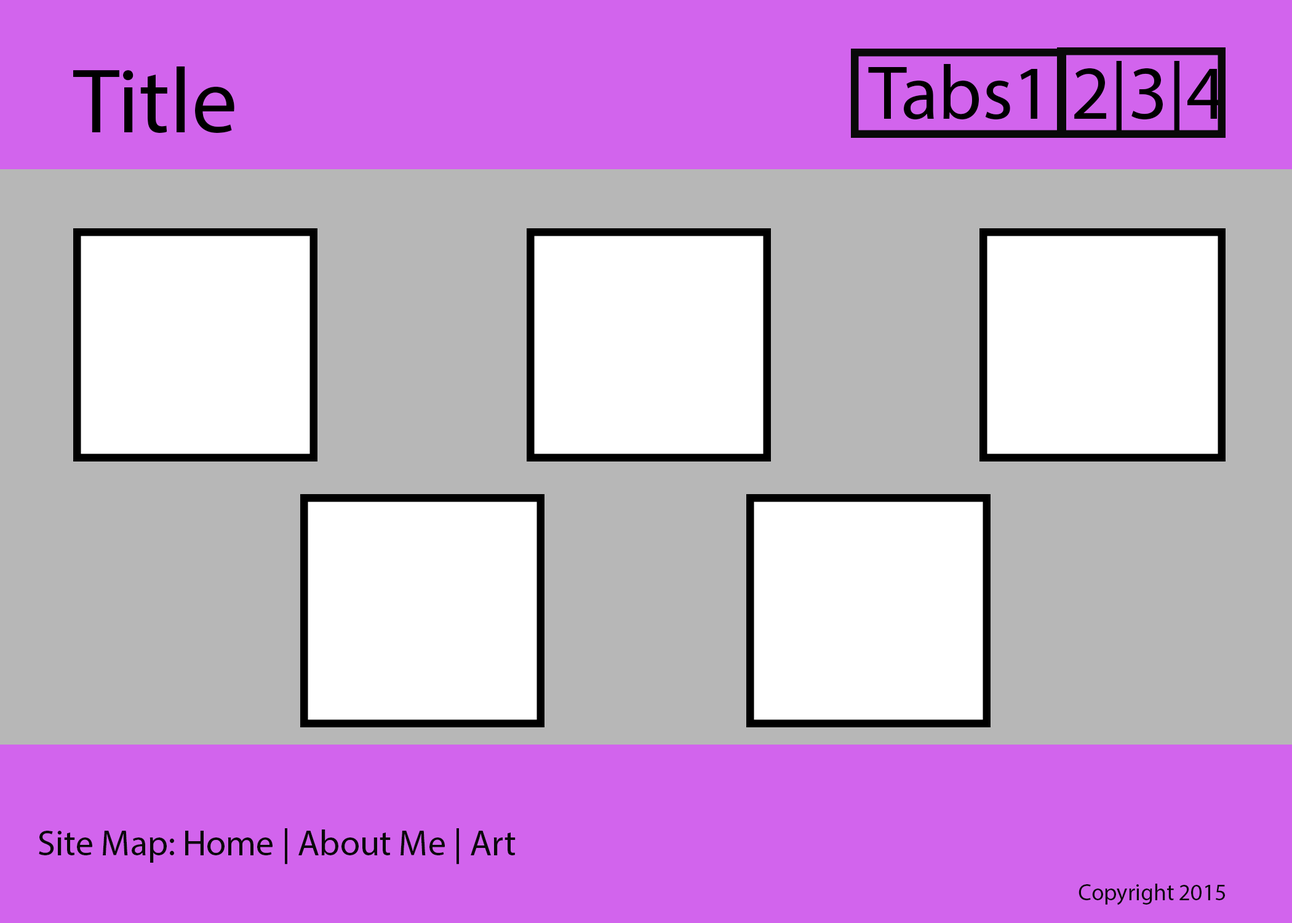
<style>
.page{position:relative;width:1292px;height:923px;background:#b7b7b7}
.page>*{position:absolute;margin:0}
.t1{font:76.9px "MyriadPro-Regular";color:#000000}
.t2{font:92.3px "MyriadPro-Regular";color:#000000}
.t3{font:35.9px "MyriadPro-Regular";color:#090909}
.t4{font:23.1px "MyriadPro-Regular";color:#090909}
</style>
<div class="page">
<p class="t1" style="left:868px;top:61px;width:356px;height:77px">Tabs1|2|3|4</p>
<p class="t2" style="left:73px;top:66px;width:161px;height:67px">Title</p>
<p class="t3" style="left:39px;top:828px;width:477px;height:36px">Site Map: Home | About Me | Art</p>
<p class="t4" style="left:1079px;top:884px;width:146px;height:21px">Copyright 2015</p>
</div>
